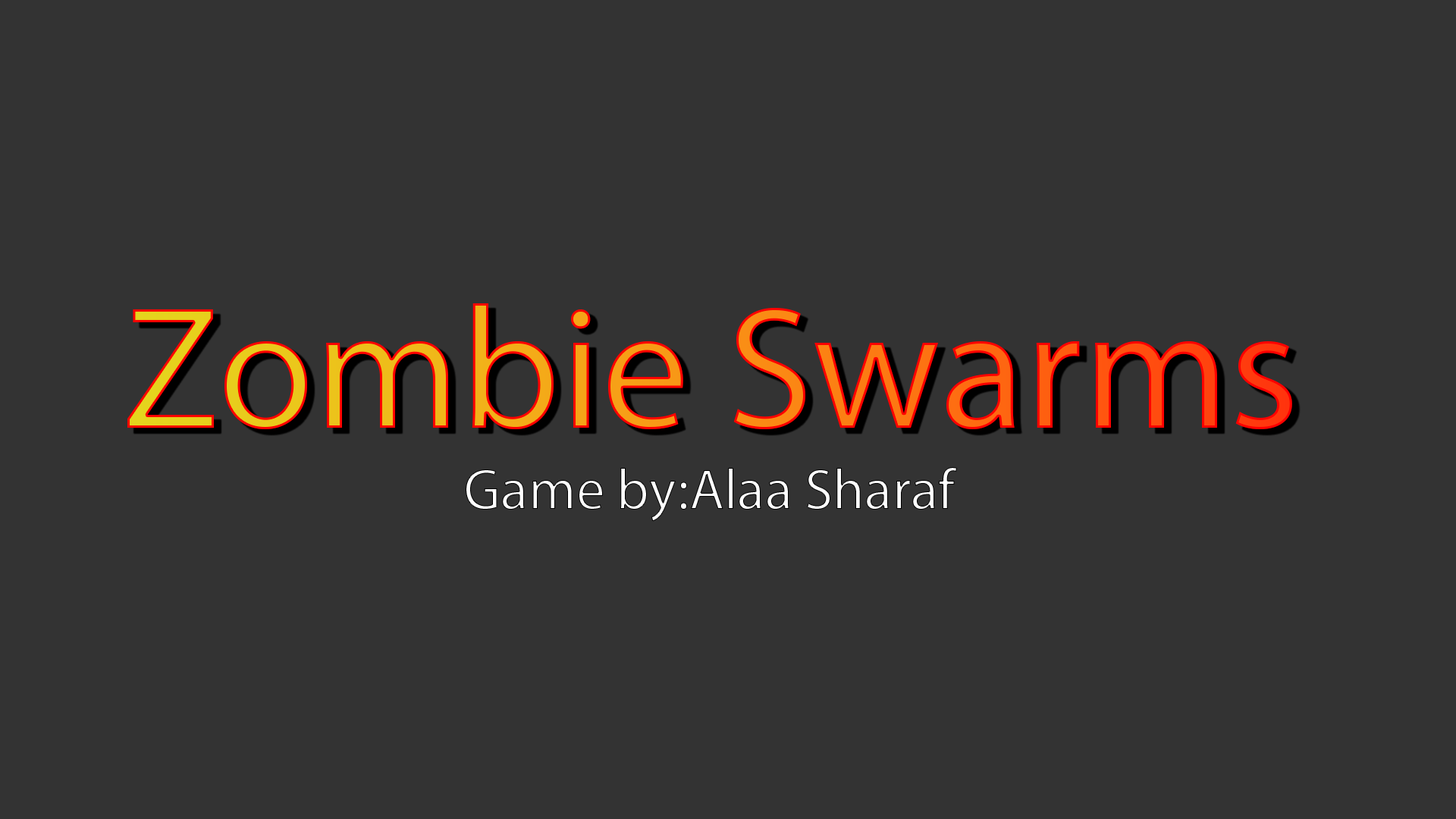
<style>
.page{position:relative;width:1456px;height:819px;background:#333333}
.page>*{position:absolute;margin:0}
.t1{font:175.6px "MyriadPro-Regular"}
.t2{font:57.2px "MyriadPro-Regular";color:#ffffff}
</style>
<div class="page">
<p class="t1" style="left:127px;top:303px;width:1165px;height:127px">Zombie Swarms</p>
<p class="t2" style="left:466px;top:467px;width:491px;height:55px">Game by:Alaa Sharaf</p>
</div>
